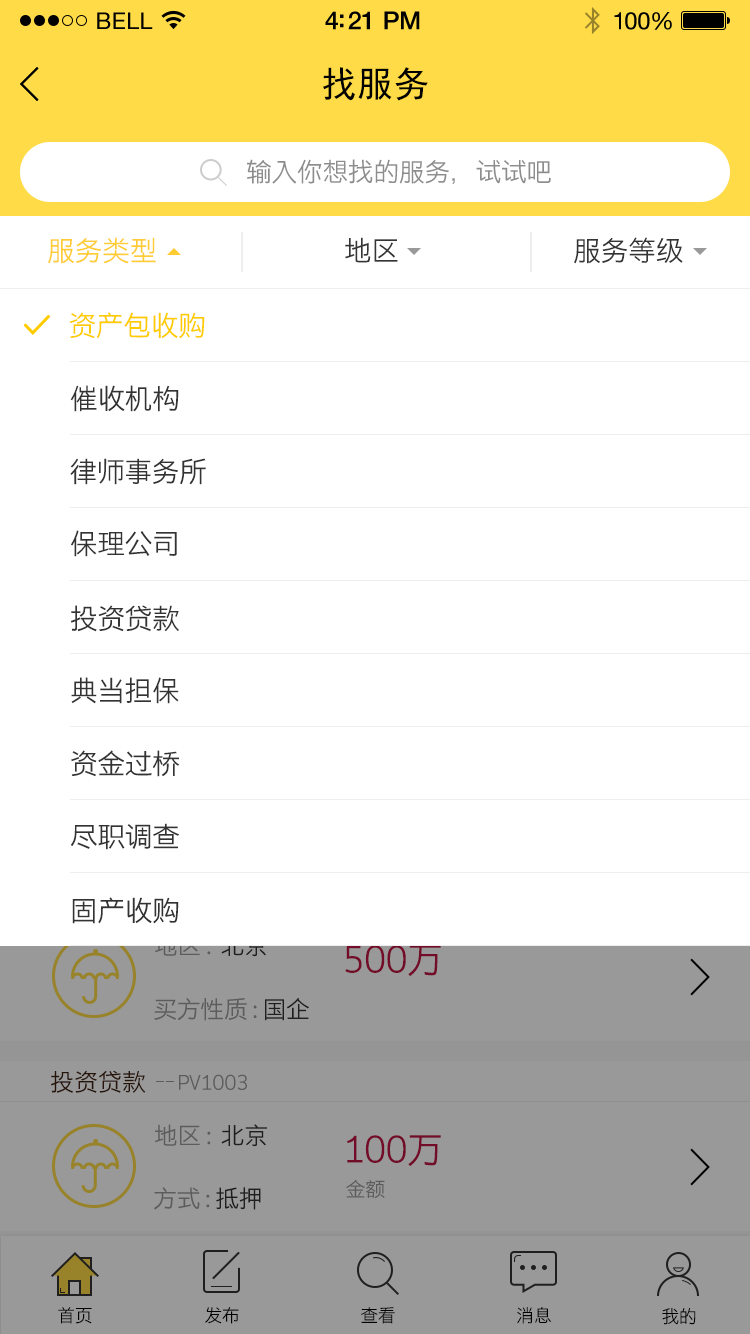
<style>
.page{position:relative;width:750px;height:1334px;background:#ffffff}
.page>*{position:absolute;margin:0}
.t1{font:23px "HelveticaNeue";letter-spacing:0.02em;color:#000000}
.t2{font:25px "HelveticaNeue-Medium";letter-spacing:-0.02em;color:#000000}
.t3{font:24px "HelveticaNeue";letter-spacing:-0.02em;color:#010101}
.t4{font:36px "SimHei";color:#000000}
.t5{font:26px "STHeitiSC-Light";letter-spacing:-0.02em;color:#8d8d8d}
.t6{font:28px "STHeitiSC-Light";letter-spacing:-0.02em;color:#ffcc33}
.t7{font:28px "STHeitiSC-Light";letter-spacing:-0.02em;color:#353535}
.t8{font:28px "STHeitiSC-Light";letter-spacing:-0.02em;color:#ffcc00}
.t9{font:28px "STHeitiSC-Light";letter-spacing:-0.02em;color:#333333}
.t10{font:36px "STHeitiSC-Light";letter-spacing:-0.02em;color:#730c29}
.t11{font:24px "STHeitiSC-Light";letter-spacing:-0.02em}
.t12{font:24px "STHeitiSC-Light";color:#271409}
.t13{font:20px "STHeitiSC-Light";letter-spacing:-0.02em;color:#5c5c5c}
.t14{font:24px "STHeitiSC-Light";letter-spacing:-0.02em;color:#999999}
.t15{font:24px "STHeitiSC-Light";letter-spacing:-0.02em;color:#333333}
.t16{font:18px "STHeitiSC-Light";letter-spacing:-0.02em;color:#000000}
</style>
<div class="page">
<p class="t1" style="left:97px;top:12px;width:56px;height:17px">BELL</p>
<p class="t1" style="left:97px;top:12px;width:56px;height:17px">BELL</p>
<p class="t2" style="left:325px;top:11px;width:95px;height:19px">4:21 PM</p>
<p class="t2" style="left:325px;top:11px;width:95px;height:19px">4:21 PM</p>
<p class="t3" style="left:614px;top:12px;width:58px;height:18px">100%</p>
<p class="t3" style="left:614px;top:12px;width:58px;height:18px">100%</p>
<p class="t4" style="left:323px;top:67px;width:105px;height:34px">找服务</p>
<p class="t5" style="left:247px;top:159px;width:304px;height:25px">输入你想找的服务，试试吧</p>
<p class="t6" style="left:48px;top:237px;width:108px;height:27px">服务类型</p>
<p class="t7" style="left:345px;top:237px;width:53px;height:26px">地区</p>
<p class="t7" style="left:574px;top:237px;width:109px;height:27px">服务等级</p>
<p class="t8" style="left:69px;top:312px;width:136px;height:27px">资产包收购</p>
<p class="t9" style="left:70px;top:385px;width:109px;height:27px">催收机构</p>
<p class="t9" style="left:70px;top:458px;width:136px;height:27px">律师事务所</p>
<p class="t9" style="left:71px;top:530px;width:106px;height:27px">保理公司</p>
<p class="t9" style="left:71px;top:605px;width:108px;height:27px">投资贷款</p>
<p class="t9" style="left:71px;top:677px;width:108px;height:27px">典当担保</p>
<p class="t9" style="left:71px;top:750px;width:109px;height:27px">资金过桥</p>
<p class="t9" style="left:70px;top:823px;width:109px;height:27px">尽职调查</p>
<p class="t9" style="left:72px;top:897px;width:107px;height:27px">固产收购</p>
<p class="t10" style="left:345px;top:945px;width:96px;height:32px">500万</p>
<p class="t10" style="left:345px;top:945px;width:96px;height:32px">500万</p>
<p class="t11" style="left:154px;top:997px;width:155px;height:23px">买方性质 : 国企</p>
<p class="t11" style="left:154px;top:997px;width:155px;height:24px">买方性质 : 国企</p>
<p class="t12" style="left:51px;top:1070px;width:95px;height:23px">投资贷款</p>
<p class="t13" style="left:179px;top:1074px;width:68px;height:16px">PV1003</p>
<p class="t11" style="left:155px;top:1124px;width:112px;height:23px">地区 :  北京</p>
<p class="t10" style="left:347px;top:1135px;width:94px;height:32px">100万</p>
<p class="t13" style="left:346px;top:1179px;width:39px;height:20px">金额</p>
<p class="t14" style="left:154px;top:1187px;width:107px;height:23px">方式 : <span class="t15">抵押</span></p>
<p class="t16" style="left:58px;top:1307px;width:34px;height:17px">首页</p>
<p class="t16" style="left:205px;top:1307px;width:34px;height:17px">发布</p>
<p class="t16" style="left:361px;top:1307px;width:34px;height:17px">查看</p>
<p class="t16" style="left:517px;top:1306px;width:34px;height:18px">消息</p>
<p class="t16" style="left:662px;top:1308px;width:34px;height:17px">我的</p>
</div>
